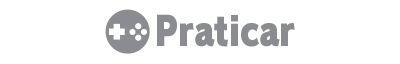
<style>
.page{position:relative;width:400px;height:64px;background:#ffffff}
.page>*{position:absolute;margin:0}
.t1{font:40px "RodinPro-UB";letter-spacing:-0.015em;color:#8b8c92;scale:0.84 1}
</style>
<div class="page">
<p class="t1" style="left:157px;top:14px;width:138px;height:33px">Praticar</p>
</div>
